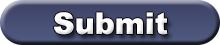
<style>
.page{position:relative;width:220px;height:45px}
.page>*{position:absolute;margin:0}
.t1{font:30px "Arial-Black";color:#ffffff}
</style>
<div class="page">
<p class="t1" style="left:54px;top:12px;width:114px;height:23px">Submit</p>
</div>
